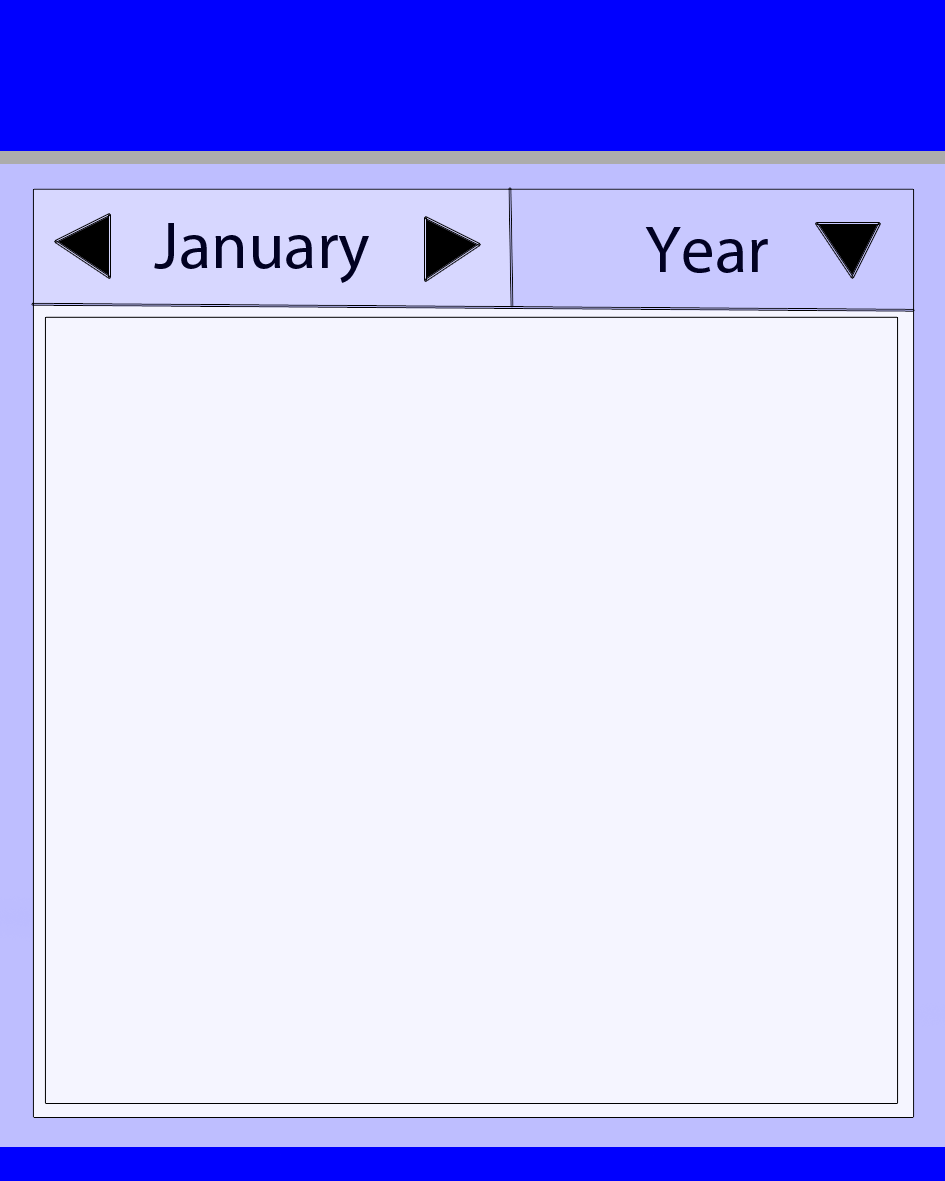
<style>
.page{position:relative;width:945px;height:1181px;background:#f5f5ff}
.page>*{position:absolute;margin:0}
.t1{font:66.7px "MyriadPro-Regular";color:#010122}
</style>
<div class="page">
<p class="t1" style="left:154px;top:223px;width:215px;height:60px">January</p>
<p class="t1" style="left:645px;top:227px;width:123px;height:46px">Year</p>
</div>
